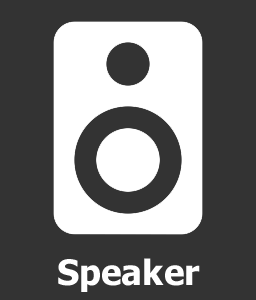
<style>
.page{position:relative;width:256px;height:300px;background:#333333}
.page>*{position:absolute;margin:0}
.t1{font:35px "Tahoma-Bold";color:#ffffff}
</style>
<div class="page">
<p class="t1" style="left:58px;top:258px;width:142px;height:34px">Speaker</p>
</div>
